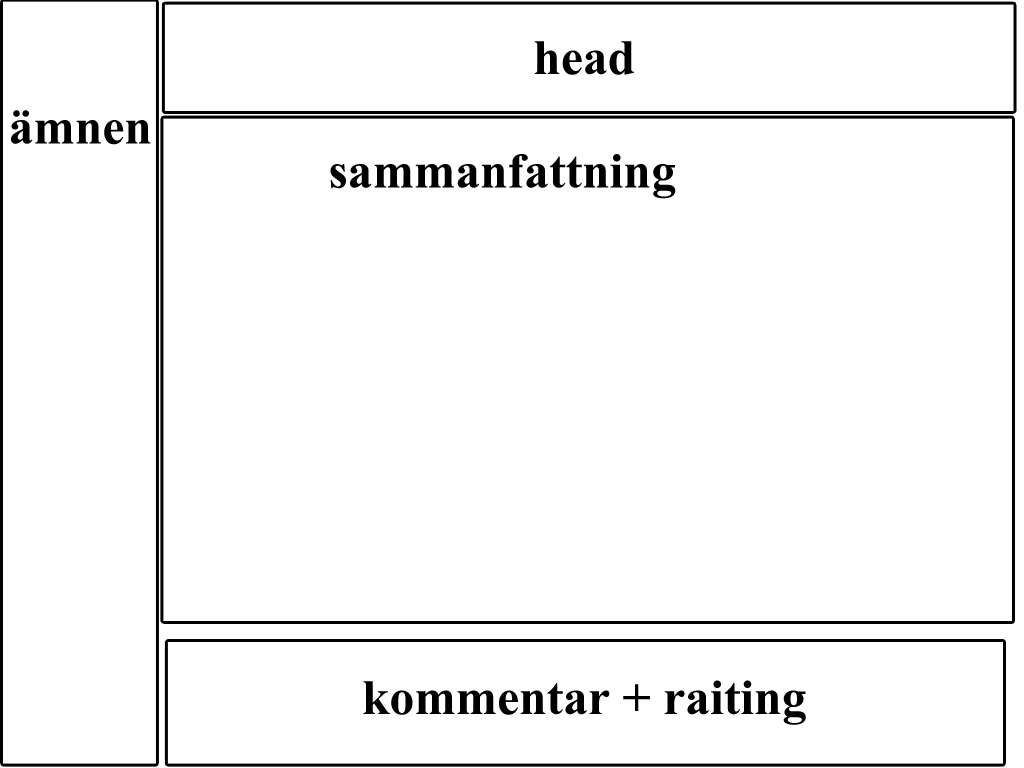
<style>
.page{position:relative;width:1024px;height:768px;background:#ffffff}
.page>*{position:absolute;margin:0}
.t1{font:60px "ShonarBangla-Bold";color:#000000}
</style>
<div class="page">
<p class="t1" style="left:534px;top:41px;width:100px;height:34px">head</p>
<p class="t1" style="left:11px;top:110px;width:140px;height:35px">ämnen</p>
<p class="t1" style="left:330px;top:154px;width:346px;height:45px">sammanfattning</p>
<p class="t1" style="left:363px;top:680px;width:443px;height:45px">kommentar + raiting</p>
</div>
